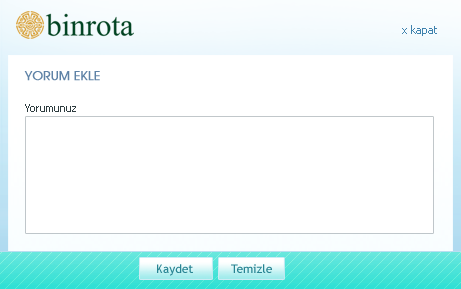
<style>
.page{position:relative;width:461px;height:289px;background:#ffffff}
.page>*{position:absolute;margin:0}
.t1{font:11px "Tahoma";color:#3f82ad}
.t2{font:12px "TRAvalonPlain";color:#5e82a6;font-weight:bold}
.t3{font:11px "Tahoma";color:#2e3c3f}
.t4{font:12px "TrebuchetMS";color:#288493}
</style>
<div class="page">
<p class="t1" style="left:402px;top:25px;width:35px;height:11px">x kapat</p>
<p class="t2" style="left:24px;top:71px;width:76px;height:10px">YORUM EKLE</p>
<p class="t3" style="left:25px;top:104px;width:51px;height:8px">Yorumunuz</p>
<p class="t4" style="left:157px;top:264px;width:36px;height:12px">Kaydet</p>
<p class="t4" style="left:231px;top:264px;width:41px;height:9px">Temizle</p>
</div>
